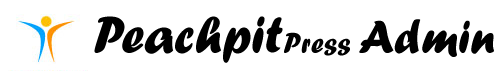
<style>
.page{position:relative;width:500px;height:80px;background:#ffffff}
.page>*{position:absolute;margin:0}
.t1{font:54px "ForteMT";color:#000000}
.t2{font:30px "ForteMT";color:#000000}
.t3{font:48px "ForteMT";color:#000000}
</style>
<div class="page">
<p class="t1" style="left:94px;top:16px;width:400px;height:47px">Peachpit<span class="t2">Press </span><span class="t3">Admin</span></p>
</div>
